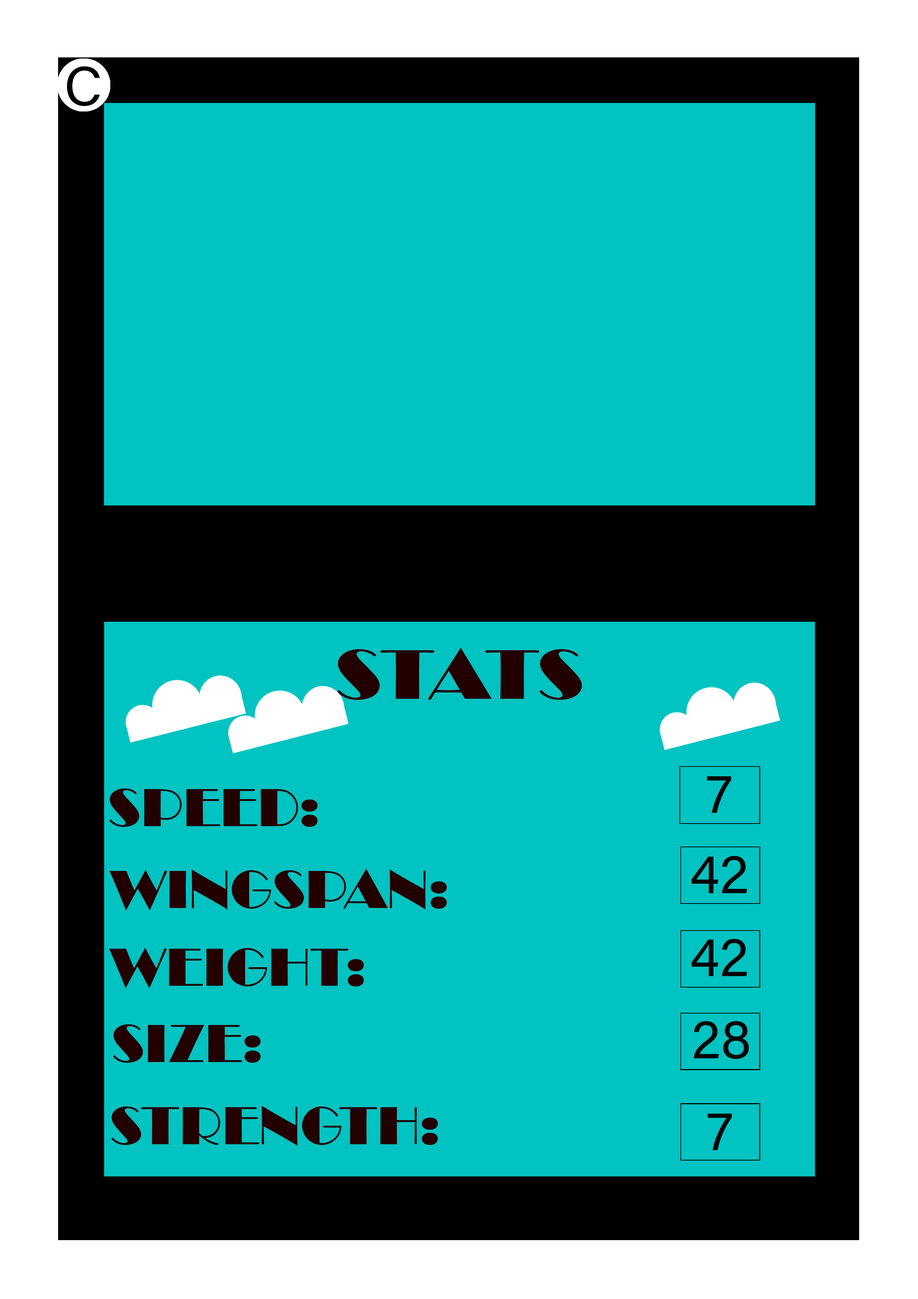
<style>
.page{position:relative;width:918px;height:1299px;background:#01c3c1}
.page>*{position:absolute;margin:0}
.t1{font:55.5px "AcuminConcept-Regular";color:#000000}
.t2{font:72.4px "Broadway";color:#230000;scale:1.09 1}
.t3{font:55.5px "Broadway";color:#230000}
</style>
<div class="page">
<p class="t1" style="left:67px;top:66px;width:33px;height:40px">C</p>
<p class="t2" style="left:338px;top:648px;width:244px;height:52px">STATS</p>
<p class="t1" style="left:707px;top:776px;width:24px;height:37px">7</p>
<p class="t3" style="left:110px;top:788px;width:208px;height:39px">SPEED:</p>
<p class="t1" style="left:692px;top:856px;width:55px;height:37px">42</p>
<p class="t3" style="left:109px;top:869px;width:338px;height:41px">WINGSPAN:</p>
<p class="t1" style="left:692px;top:939px;width:55px;height:37px">42</p>
<p class="t3" style="left:109px;top:947px;width:255px;height:41px">WEIGHT:</p>
<p class="t3" style="left:113px;top:1024px;width:148px;height:39px">SIZE:</p>
<p class="t1" style="left:694px;top:1021px;width:55px;height:38px">28</p>
<p class="t3" style="left:111px;top:1105px;width:327px;height:40px">STRENGTH:</p>
<p class="t1" style="left:708px;top:1113px;width:24px;height:37px">7</p>
</div>
